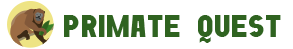
<style>
.page{position:relative;width:293px;height:49px;background:#ffffff}
.page>*{position:absolute;margin:0}
.t1{font:36.1px "BoldGameFont7";letter-spacing:0.025em;color:#2f6320;text-transform:uppercase}
</style>
<div class="page">
<p class="t1" style="left:64px;top:15px;width:217px;height:28px">Primate Quest</p>
</div>
